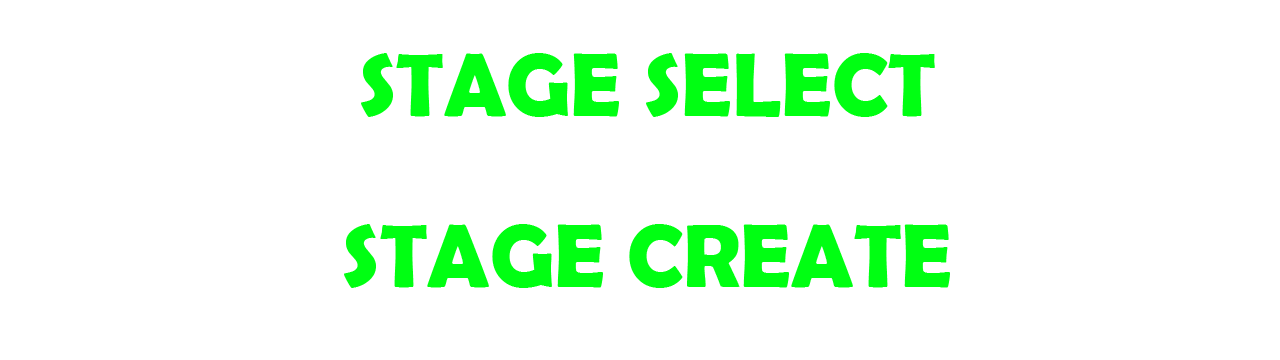
<style>
.page{position:relative;width:1280px;height:360px;background:#ffffff}
.page>*{position:absolute;margin:0}
.t1{font:90px "BerlinSansFBDemi-Bold";color:#00ff12}
</style>
<div class="page">
<p class="t1" style="left:361px;top:53px;width:574px;height:64px">STAGE SELECT</p>
<p class="t1" style="left:344px;top:224px;width:606px;height:64px">STAGE CREATE</p>
</div>
